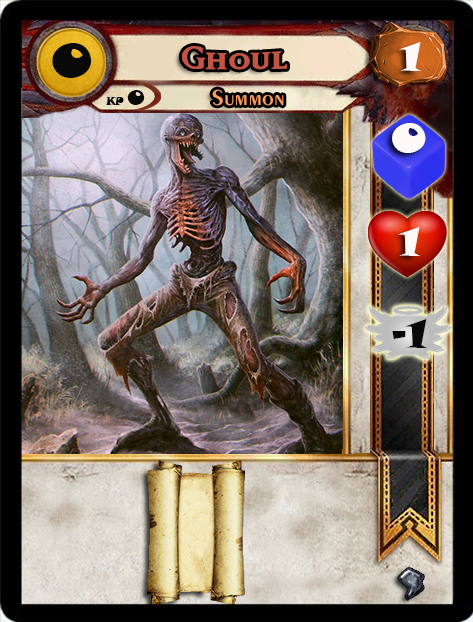
<style>
.page{position:relative;width:473px;height:622px}
.page>*{position:absolute;margin:0}
.t1{font:46.6px "SnapITC-Regular";color:#090909;scale:1.05 1}
.t2{font:40px "MatrixBoldSmallCaps";color:#c25443;scale:1.06 1}
.t3{font:40px "SnapITC-Regular";color:#fef9f9;scale:1.05 1}
.t4{font:22.7px "Exotic350BT-DemiBold";color:#f89c64;scale:1.06 1}
.t5{font:20.5px "SnapITC-Regular";color:#090909}
.t6{font:40px "SnapITC-Regular";color:#090909;scale:1.05 1}
</style>
<div class="page">
<p class="t1" style="left:52px;top:43px;width:40px;height:35px">0</p>
<p class="t2" style="left:182px;top:46px;width:105px;height:24px">Ghoul</p>
<p class="t3" style="left:399px;top:42px;width:22px;height:29px">1</p>
<p class="t4" style="left:212px;top:89px;width:72px;height:17px">Summon</p>
<p class="t5" style="left:127px;top:90px;width:18px;height:15px">0</p>
<p class="t3" style="left:392px;top:123px;width:34px;height:30px">0</p>
<p class="t3" style="left:398px;top:227px;width:22px;height:29px">1</p>
<p class="t6" style="left:392px;top:319px;width:35px;height:29px">-1</p>
</div>
